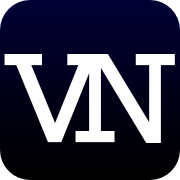
<style>
.page{position:relative;width:180px;height:180px;background:#ffffff}
.page>*{position:absolute;margin:0}
.t1{font:130px "Rockwell";letter-spacing:-0.2em;color:#ffffff;scale:1.07 1}
</style>
<div class="page">
<p class="t1" style="left:4px;top:54px;width:171px;height:89px">VN</p>
</div>
